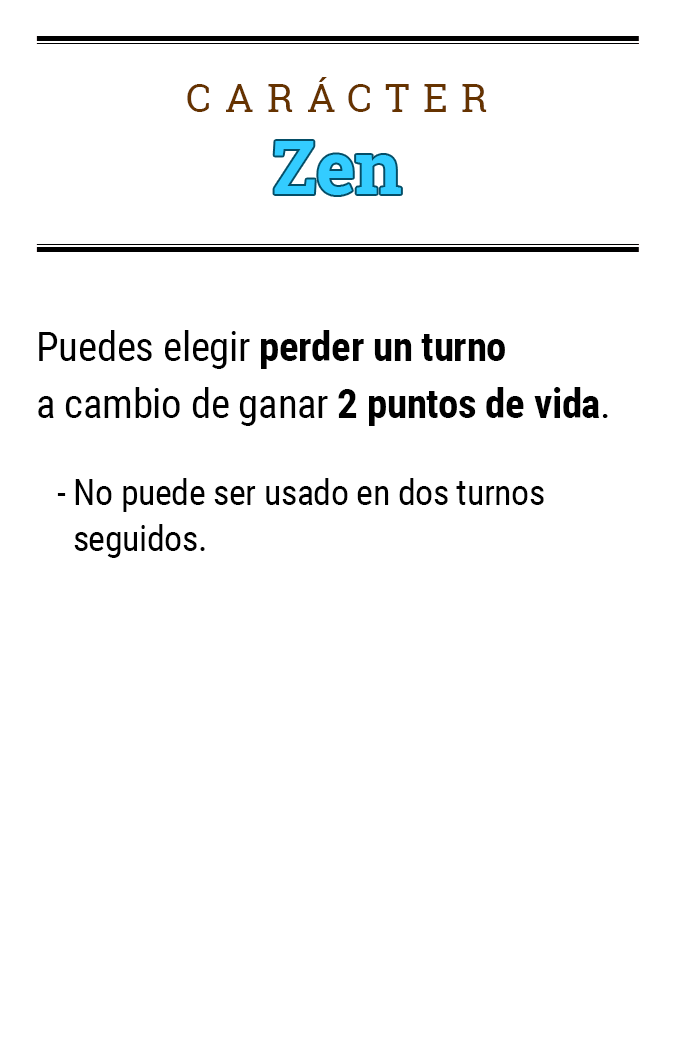
<style>
.page{position:relative;width:675px;height:1050px;background:#ffffff}
.page>*{position:absolute;margin:0}
.t1{font:39.2px "RobotoSlab-Regular";letter-spacing:0.34em;color:#663300}
.t2{font:74.5px "RobotoSlab-Bold";color:#33ccff}
.t3{font:35.8px/45.8px "RobotoCondensed-Regular";letter-spacing:-0.01em;color:#000000}
.t4{font:41.1px/57.1px "RobotoCondensed-Regular";letter-spacing:-0.01em;color:#000000}
.t5{font:41.1px/57.1px "RobotoCondensed-Bold";letter-spacing:-0.01em;color:#000000}
</style>
<div class="page">
<p class="t1" style="left:187px;top:77px;width:300px;height:35px">CARÁCTER</p>
<p class="t2" style="left:274px;top:141px;width:127px;height:54px">Zen</p>
<p class="t3" style="left:38px;top:330px;width:570px;height:228px"><span class="t4">Puedes elegir </span><span class="t5">perder un turno<br></span><span class="t4">a cambio de ganar </span><span class="t5">2 puntos de vida</span><span class="t4">.<br><br></span>- No puede ser usado en dos turnos<br>  seguidos.</p>
</div>
